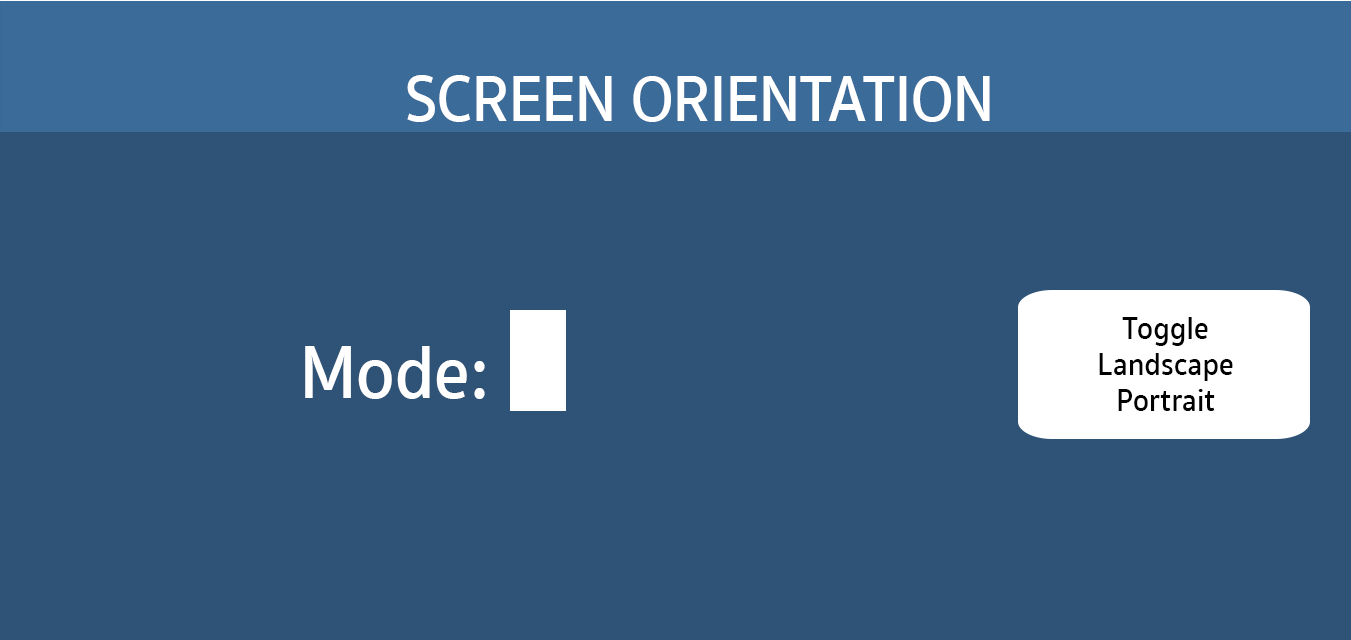
<style>
.page{position:relative;width:1351px;height:640px;background:#2e5376}
.page>*{position:absolute;margin:0}
.t1{font:66.6px "SukhumvitSet-SemiBold";color:#ffffff;scale:0.91 1}
.t2{font:32.2px/36px "SukhumvitSet-SemiBold";color:#010101;scale:0.91 1}
.t3{font:76.6px "SukhumvitSet-SemiBold";color:#ffffff;scale:0.91 1}
</style>
<div class="page">
<p class="t1" style="left:407px;top:75px;width:583px;height:47px">SCREEN ORIENTATION</p>
<p class="t2" style="left:1099px;top:317px;width:134px;height:94px;text-align:center">Toggle<br>Landscape<br>Portrait</p>
<p class="t3" style="left:305px;top:346px;width:180px;height:53px">Mode:</p>
</div>
